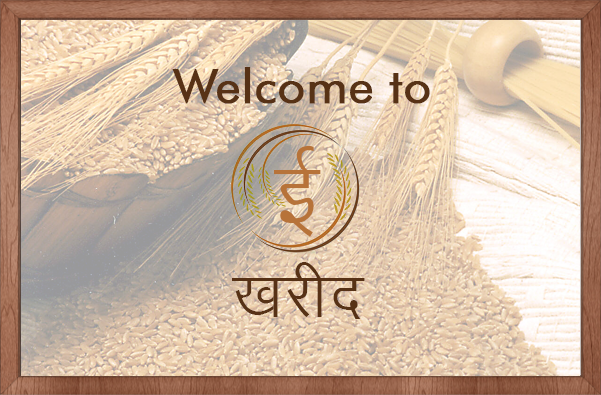
<style>
.page{position:relative;width:601px;height:395px}
.page>*{position:absolute;margin:0}
.t1{font:48px "FuturaBT-Book";color:#573216;font-weight:bold}
.t2{font:102.8px "KrutiDev010";color:#b77339}
.t3{font:74.8px "KrutiDev010";color:#573216}
</style>
<div class="page">
<p class="t1" style="left:172px;top:67px;width:258px;height:37px">Welcome to</p>
<p class="t2" style="left:274px;top:146px;width:47px;height:91px">Ã</p>
<p class="t3" style="left:232px;top:262px;width:133px;height:57px">[kjhn</p>
</div>
